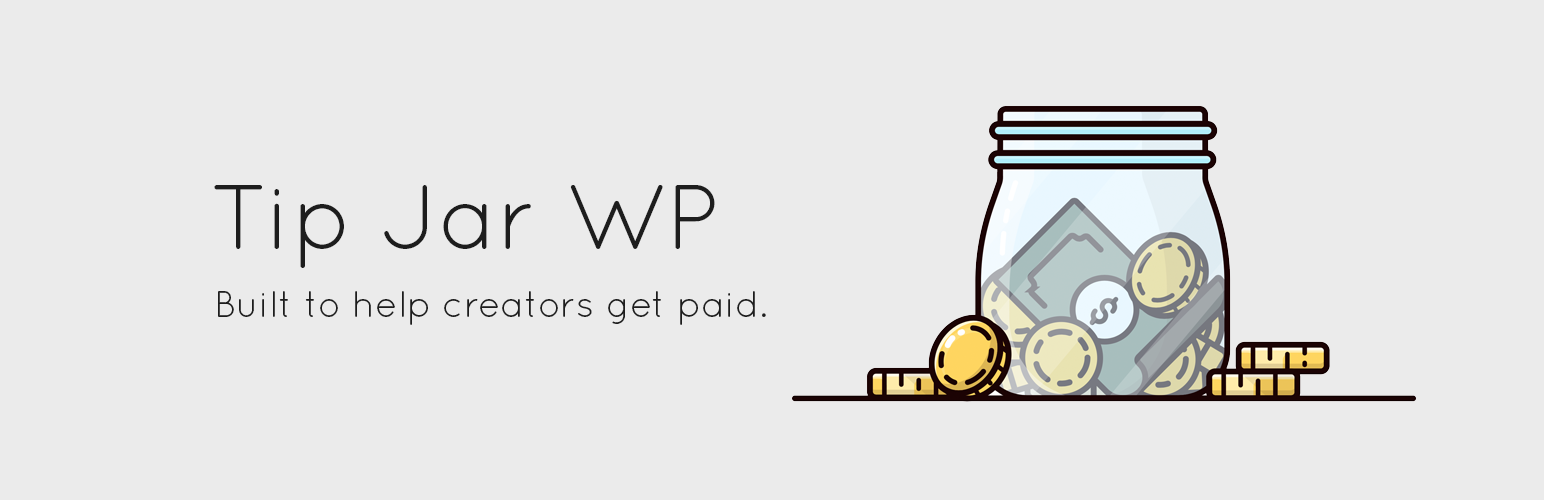
<style>
.page{position:relative;width:1544px;height:500px;background:#ebebeb}
.page>*{position:absolute;margin:0}
.t1{font:92px "Quicksand-Regular";color:#1d1d1d}
.t2{font:37px "Quicksand-Regular";color:#1d1d1d}
</style>
<div class="page">
<p class="t1" style="left:214px;top:185px;width:501px;height:83px">Tip Jar WP</p>
<p class="t2" style="left:218px;top:291px;width:548px;height:34px">Built to help creators get paid.</p>
</div>
